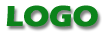
<style>
.page{position:relative;width:105px;height:37px;background:#ffffff}
.page>*{position:absolute;margin:0}
.t1{font:30px "ErasITC-Bold";color:#0d831b}
</style>
<div class="page">
<p class="t1" style="left:6px;top:5px;width:92px;height:22px">LOGO</p>
</div>
